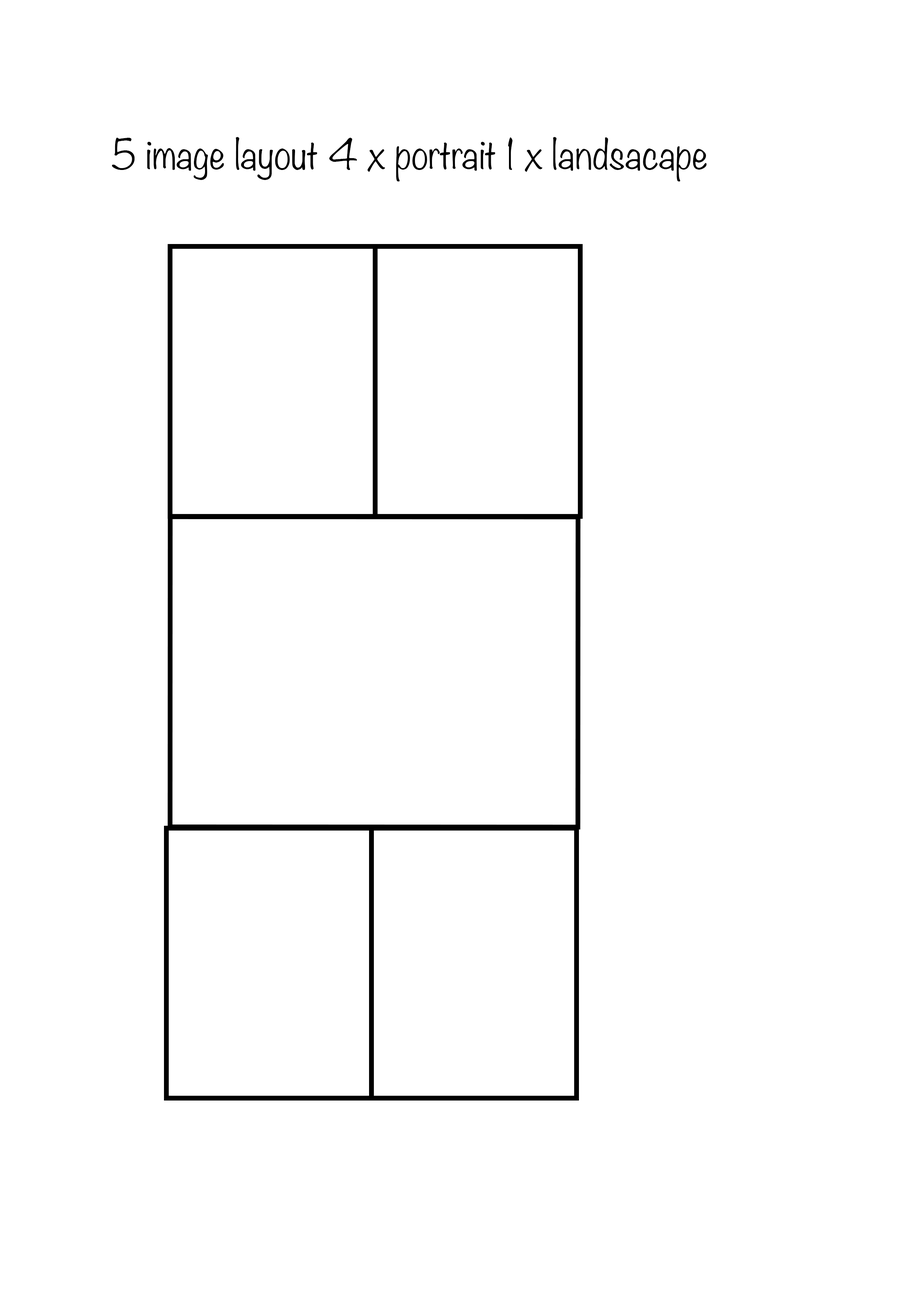
<style>
.page{position:relative;width:918px;height:1299px;background:#ffffff}
.page>*{position:absolute;margin:0}
.t1{font:37px "Noteworthy-Light";color:#000000}
</style>
<div class="page">
<p class="t1" style="left:112px;top:137px;width:595px;height:44px">5 image layout 4 x portrait 1 x landsacape</p>
</div>
